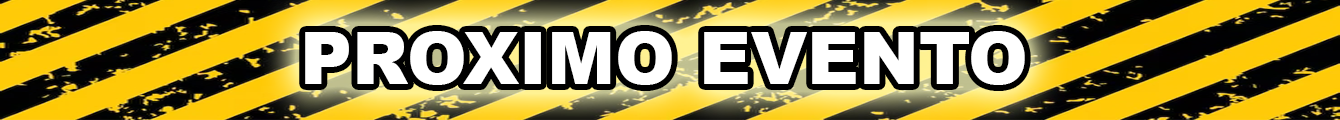
<style>
.page{position:relative;width:1340px;height:120px}
.page>*{position:absolute;margin:0}
.t1{font:72px "Arial-Black";color:#ffffff}
</style>
<div class="page">
<p class="t1" style="left:305px;top:31px;width:720px;height:54px">PROXIMO EVENTO</p>
</div>
